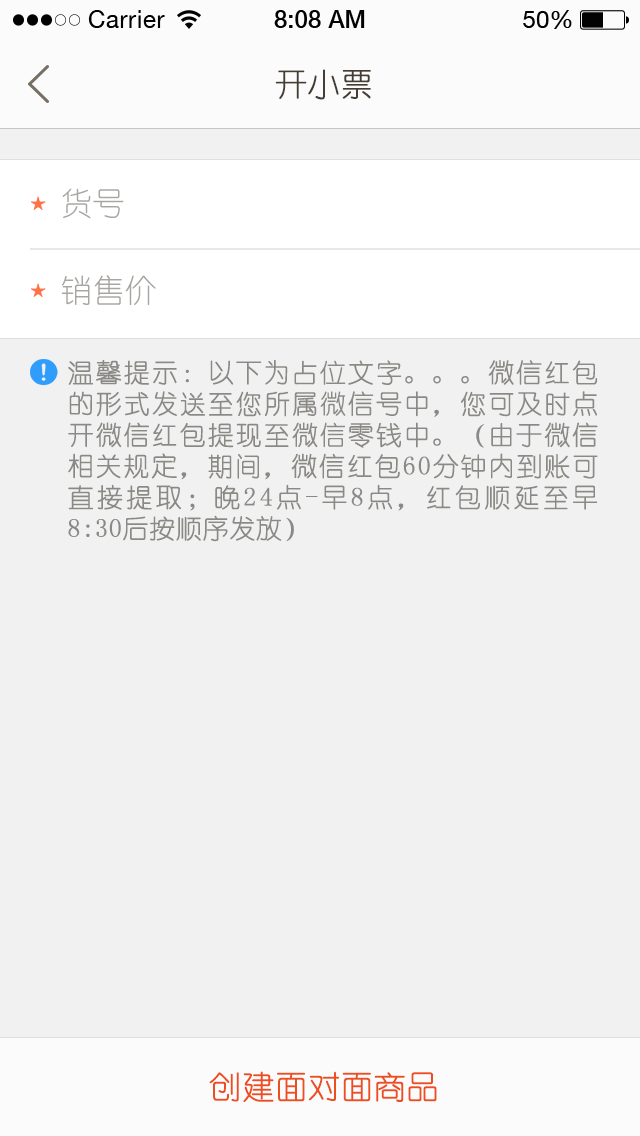
<style>
.page{position:relative;width:640px;height:1136px;background:#f1f1f1}
.page>*{position:absolute;margin:0}
.t1{font:32px "YouYuan";color:#433d33;text-transform:uppercase;font-weight:bold}
.t2{font:32px "YouYuan";color:#a7a6a3;text-transform:uppercase}
.t3{font:26px "YouYuan";color:#8b8985;text-transform:uppercase;font-weight:bold}
.t4{font:32px "YouYuan";color:#ed4e1f;text-transform:uppercase;font-weight:bold}
</style>
<div class="page">
<p class="t1" style="left:275px;top:69px;width:96px;height:31px">开小票</p>
<p class="t2" style="left:62px;top:188px;width:62px;height:31px">货号</p>
<p class="t2" style="left:61px;top:275px;width:95px;height:30px">销售价</p>
<p class="t3" style="left:68px;top:360px;width:530px;height:182px;text-align:justify">温馨提示：以下为占位文字。。。微信红包的形式发送至您所属微信号中，您可及时点开微信红包提现至微信零钱中。（由于微信相关规定，期间，微信红包60分钟内到账可直接提取；晚24点-早8点，红包顺延至早8:30后按顺序发放）</p>
<p class="t4" style="left:209px;top:1071px;width:228px;height:31px">创建面对面商品</p>
</div>
